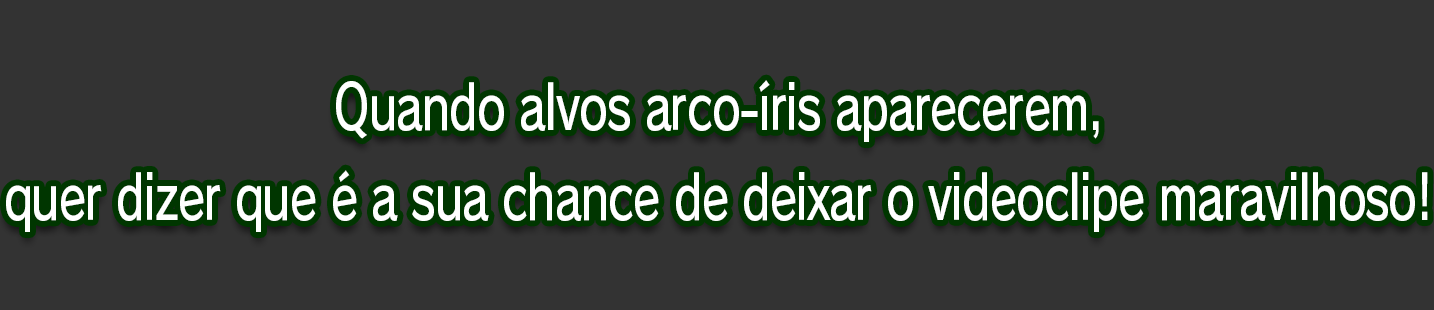
<style>
.page{position:relative;width:1434px;height:310px;background:#333333}
.page>*{position:absolute;margin:0}
.t1{font:61.3px/90.7px "RodinPro-DB";letter-spacing:-0.022em;color:#ffffff;scale:0.74 1}
</style>
<div class="page">
<p class="t1" style="left:6px;top:80px;width:1422px;height:152px;text-align:center">Quando alvos arco-íris aparecerem,<br>quer dizer que é a sua chance de deixar o videoclipe maravilhoso!</p>
</div>
